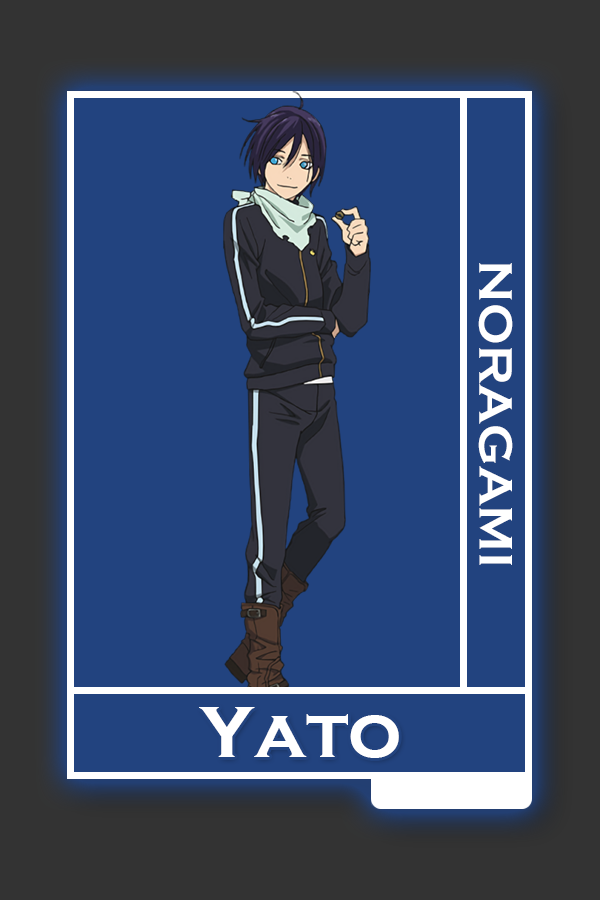
<style>
.page{position:relative;width:600px;height:900px;background:#22437f}
.page>*{position:absolute;margin:0}
.t1{font:48.8px "CopperplateGothic-Bold";color:#ffffff}
.t2{font:75px "CopperplateGothic-Bold";color:#ffffff}
</style>
<div class="page">
<p class="t1" style="left:478px;top:263px;width:35px;height:302px;rotate:90deg">NORAGAMI</p>
<p class="t2" style="left:199px;top:707px;width:200px;height:51px">Yato</p>
</div>
